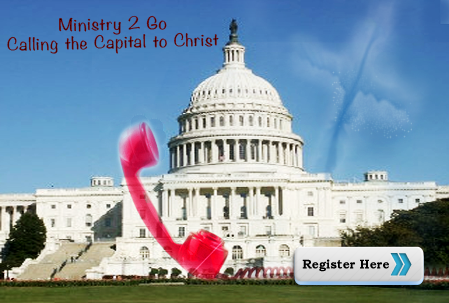
<style>
.page{position:relative;width:449px;height:303px}
.page>*{position:absolute;margin:0}
.t1{font:15px "Noteworthy-Light";letter-spacing:0.05em;color:#580102;scale:1.21 1}
.t2{font:13px "BookmanOldStyle-Bold";letter-spacing:0.01em;color:#000000;scale:0.93 1}
</style>
<div class="page">
<p class="t1" style="left:7px;top:15px;width:212px;height:39px;text-align:center;rotate:-1deg">Ministry 2 Go<br>Calling the Capital to Christ</p>
<p class="t2" style="left:302px;top:259px;width:87px;height:13px">Register Here</p>
</div>
